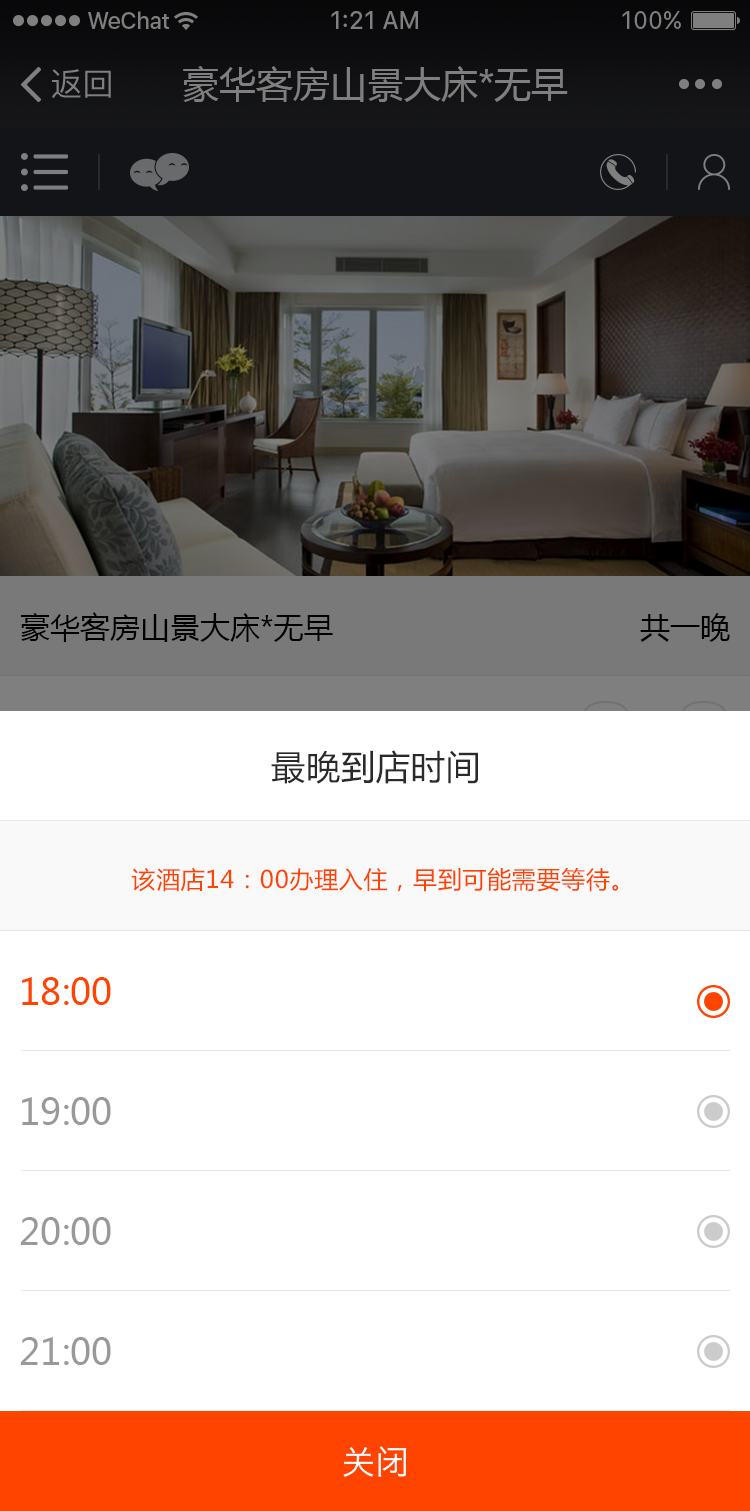
<style>
.page{position:relative;width:750px;height:1511px;background:#ffffff}
.page>*{position:absolute;margin:0}
.t1{font:34px "MicrosoftYaHei";letter-spacing:0.03em;color:#2a2a2a}
.t2{font:24px "MicrosoftYaHei";letter-spacing:0.03em;color:#ff4400}
.t3{font:36px "MicrosoftYaHei";color:#ff4400}
.t4{font:36px "MicrosoftYaHei";color:#999999}
.t5{font:32.8px "HiraginoSansGB-W3";letter-spacing:0.03em;color:#ffffff}
</style>
<div class="page">
<p class="t1" style="left:271px;top:750px;width:207px;height:34px">最晚到店时间</p>
<p class="t2" style="left:131px;top:867px;width:488px;height:25px">该酒店14：00办理入住，早到可能需要等待。</p>
<p class="t3" style="left:22px;top:977px;width:89px;height:28px">18:00</p>
<p class="t4" style="left:22px;top:1097px;width:89px;height:28px">19:00</p>
<p class="t4" style="left:20px;top:1217px;width:91px;height:28px">20:00</p>
<p class="t4" style="left:20px;top:1337px;width:91px;height:28px">21:00</p>
<p class="t5" style="left:343px;top:1446px;width:64px;height:31px">关闭</p>
</div>
